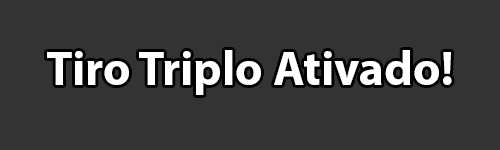
<style>
.page{position:relative;width:500px;height:150px;background:#333333}
.page>*{position:absolute;margin:0}
.t1{font:48px "MyriadPro-Bold";color:#ffffff}
.t2{font:48px "MyriadPro-Bold";color:#000000}
</style>
<div class="page">
<p class="t1" style="left:47px;top:50px;width:405px;height:45px"><span class="t2"><br><br><br></span>Tiro Triplo Ativado!</p>
</div>
